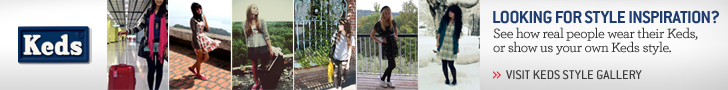
<style>
.page{position:relative;width:728px;height:90px}
.page>*{position:absolute;margin:0}
.t1{font:19px "ConduitITC-Bold";letter-spacing:-0.025em;color:#1e3c70;text-transform:uppercase}
.t2{font:14px/14px "Archer-Medium";letter-spacing:-0.025em;color:#333333}
.t3{font:14px "ConduitITC-Medium";color:#333333}
</style>
<div class="page">
<p class="t1" style="left:493px;top:10px;width:226px;height:14px">LOOKING FOR Style Inspiration?</p>
<p class="t2" style="left:493px;top:27px;width:205px;height:28px">See how real people wear their Keds,<br>or show us your own Keds style.</p>
<p class="t3" style="left:506px;top:70px;width:136px;height:10px;opacity:0.94">VISIT KEDS STYLE GALLERY</p>
</div>
